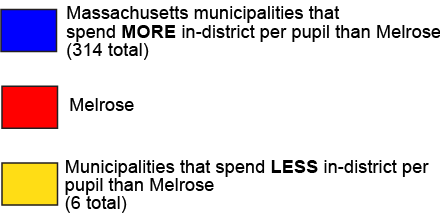
<style>
.page{position:relative;width:440px;height:216px;background:#ffffff}
.page>*{position:absolute;margin:0}
.t1{font:18.3px/18.3px "ArialMT";color:#000000}
.t2{font:18.3px/18.3px "Arial-BoldMT";color:#000000}
.t3{font:18.3px "ArialMT";color:#000000}
</style>
<div class="page">
<p class="t1" style="left:66px;top:6px;width:375px;height:54px">Massachusetts municipalities that<br>spend <span class="t2">MORE</span> in-district per pupil than Melrose<br>(314 total)</p>
<p class="t3" style="left:70px;top:98px;width:64px;height:13px">Melrose</p>
<p class="t1" style="left:65px;top:160px;width:364px;height:53px">Municipalities that spend <span class="t2">LESS</span> in-district per<br>pupil than Melrose<br>(6 total)</p>
</div>
